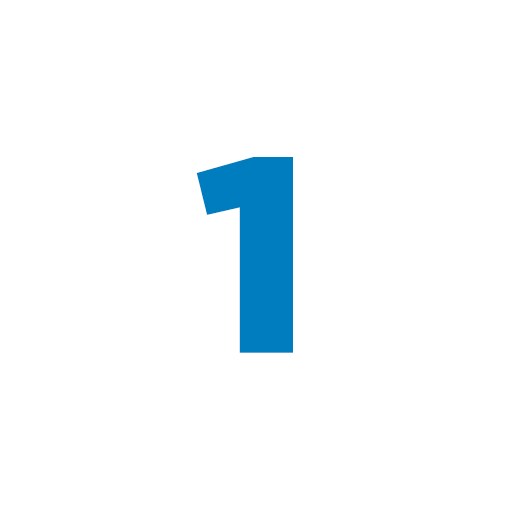
<style>
.page{position:relative;width:512px;height:512px;background:#ffffff}
.page>*{position:absolute;margin:0}
.t1{font:277.3px "Gotham-Black";color:#007dbe}
</style>
<div class="page">
<p class="t1" style="left:196px;top:157px;width:97px;height:196px">1</p>
</div>
